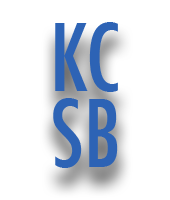
<style>
.page{position:relative;width:170px;height:200px;background:#ffffff}
.page>*{position:absolute;margin:0}
.t1{font:90px/76px "Futura-CondensedMedium";color:#2d63b5}
</style>
<div class="page">
<p class="t1" style="left:53px;top:22px;width:65px;height:146px">KC<br>SB</p>
</div>
